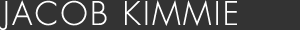
<style>
.page{position:relative;width:300px;height:30px;background:#333333}
.page>*{position:absolute;margin:0}
.t1{font:31.5px "FuturaStd-Light";letter-spacing:0.08em;color:#ffffff}
</style>
<div class="page">
<p class="t1" style="left:0px;top:0px;width:237px;height:30px">JACOB KIMMIE</p>
</div>
